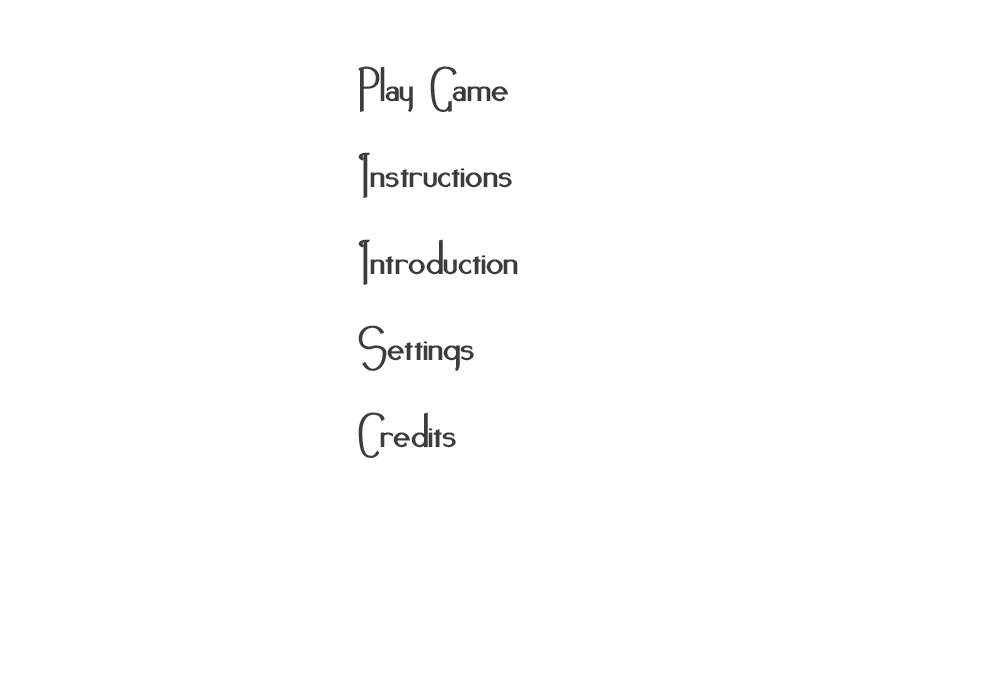
<style>
.page{position:relative;width:1000px;height:700px;background:#ffffff}
.page>*{position:absolute;margin:0}
.t1{font:36px "Noir-et-Blanc-Bold"}
.t2{font:36px "Noir-et-Blanc-Bold";color:#3d3b3b}
</style>
<div class="page">
<p class="t1" style="left:359px;top:64px;width:160px;height:392px">Play Game<br><br>Instructions<br><br>Introduction<br><br>Settings<br><br>Credits</p>
<p class="t2" style="left:358px;top:66px;width:160px;height:392px">Play Game<br><br>Instructions<br><br>Introduction<br><br>Settings<br><br>Credits</p>
</div>
